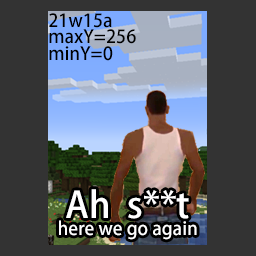
<style>
.page{position:relative;width:256px;height:256px;background:#333333}
.page>*{position:absolute;margin:0}
.t1{font:18px "AdobeHeitiStd-Regular";color:#000000}
.t2{font:18px "AdobeHeitiStd-Regular";color:#ffffff}
.t3{font:36px/48px "AdobeHeitiStd-Regular";color:#ffffff}
</style>
<div class="page">
<p class="t1" style="left:49px;top:13px;width:87px;height:48px">21w15a<br>maxY=256<br>minY=0</p>
<p class="t2" style="left:59px;top:189px;width:138px;height:51px;text-align:center"><span class="t3">Ah  s**t<br></span>here we go again</p>
</div>
